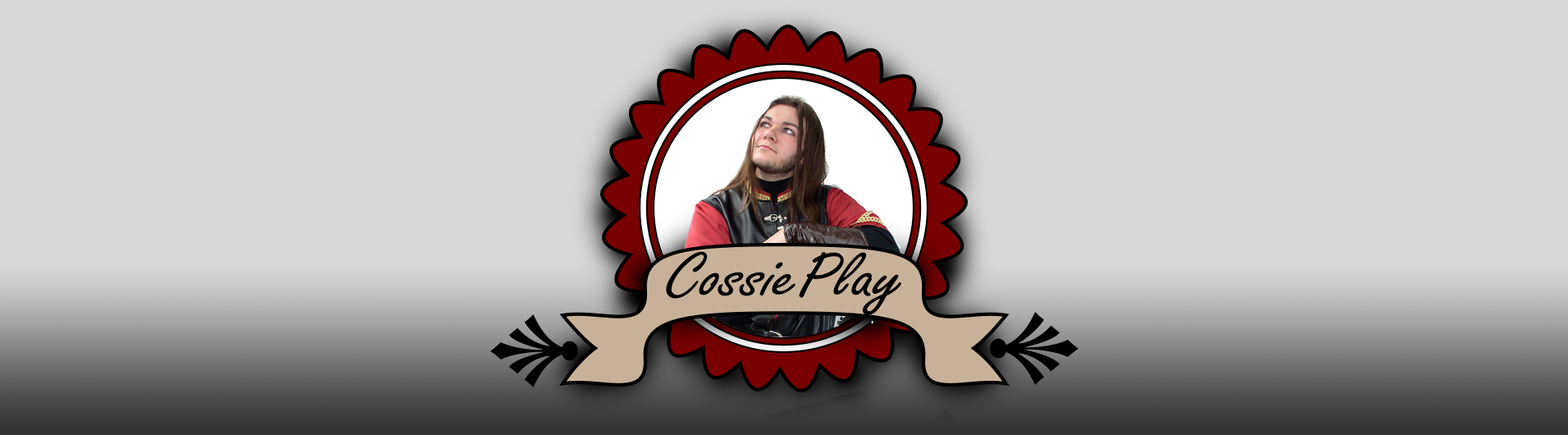
<style>
.page{position:relative;width:1568px;height:435px;background:#d9d9d9}
.page>*{position:absolute;margin:0}
.t1{font:67.9px "FreestyleScript-Regular";color:#000000;scale:1.24 1}
</style>
<div class="page">
<p class="t1" style="left:666px;top:251px;width:235px;height:64px">CossiePlay</p>
</div>
